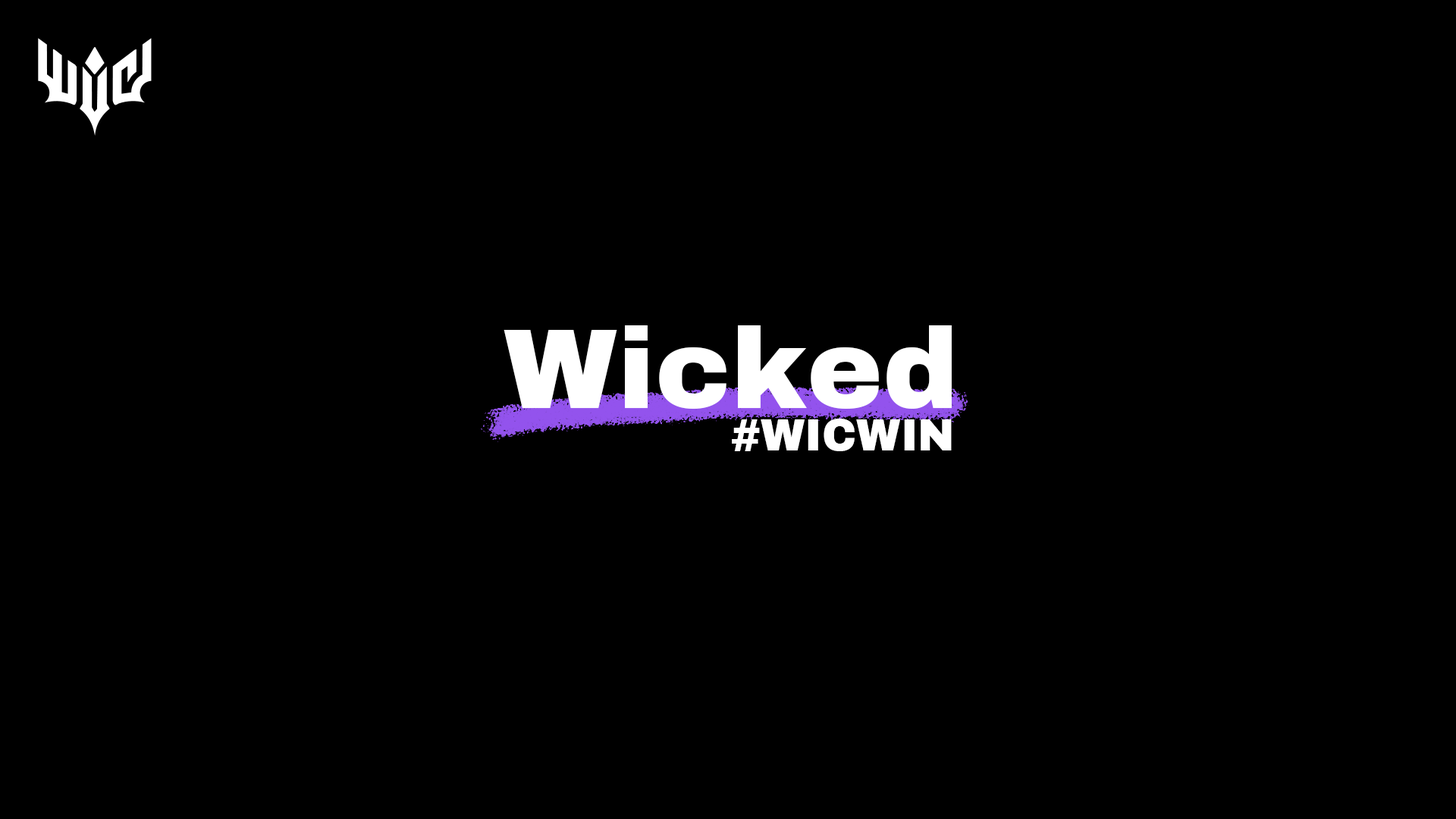
<style>
.page{position:relative;width:1456px;height:819px;background:#000000}
.page>*{position:absolute;margin:0}
.t1{font:113.7px "ArchivoBlack-Regular";color:#ffffff}
.t2{font:44.2px "ArchivoBlack-Regular";color:#ffffff}
</style>
<div class="page">
<p class="t1" style="left:504px;top:325px;width:448px;height:84px">Wicked</p>
<p class="t2" style="left:732px;top:419px;width:220px;height:32px">#WICWIN</p>
</div>
